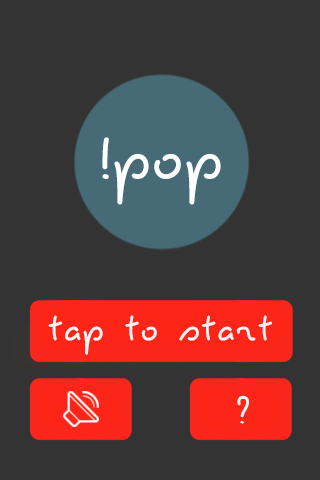
<style>
.page{position:relative;width:320px;height:480px;background:#333333}
.page>*{position:absolute;margin:0}
.t1{font:75px "Pecita";color:#fefefe}
.t2{font:41.7px "Pecita";color:#f5f5f5}
</style>
<div class="page">
<p class="t1" style="left:102px;top:137px;width:119px;height:68px">!pop</p>
<p class="t2" style="left:48px;top:315px;width:224px;height:40px">tap to start</p>
<p class="t2" style="left:237px;top:395px;width:12px;height:29px">?</p>
</div>
